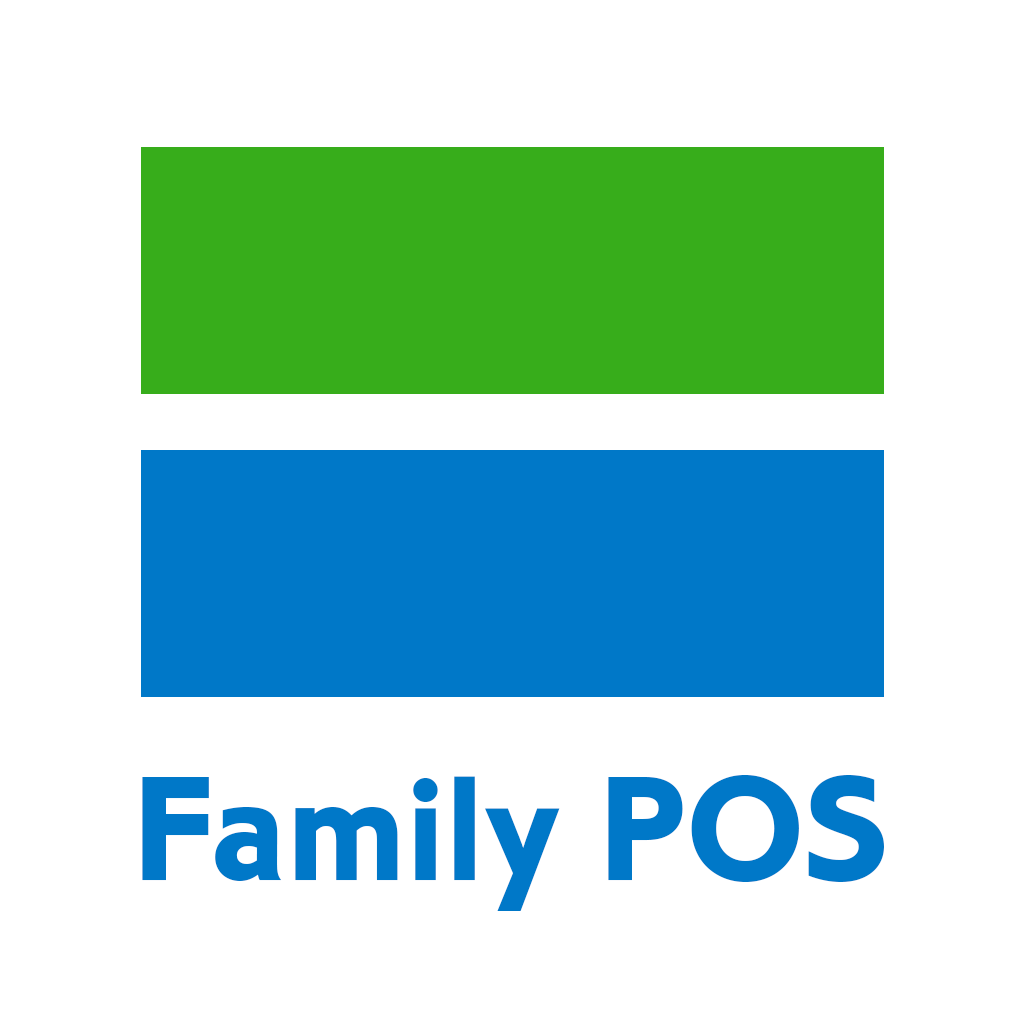
<style>
.page{position:relative;width:1024px;height:1024px;background:#ffffff}
.page>*{position:absolute;margin:0}
.t1{font:155.4px "CorinthianBoldPlain";color:#0078c8}
</style>
<div class="page">
<p class="t1" style="left:142px;top:775px;width:742px;height:136px">Family POS</p>
</div>
